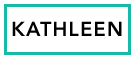
<style>
.page{position:relative;width:135px;height:60px;background:#ffffff}
.page>*{position:absolute;margin:0}
.t1{font:20px "Avenir-Heavy";letter-spacing:0.06em;color:#000000}
</style>
<div class="page">
<p class="t1" style="left:12px;top:21px;width:110px;height:15px">KATHLEEN</p>
</div>
